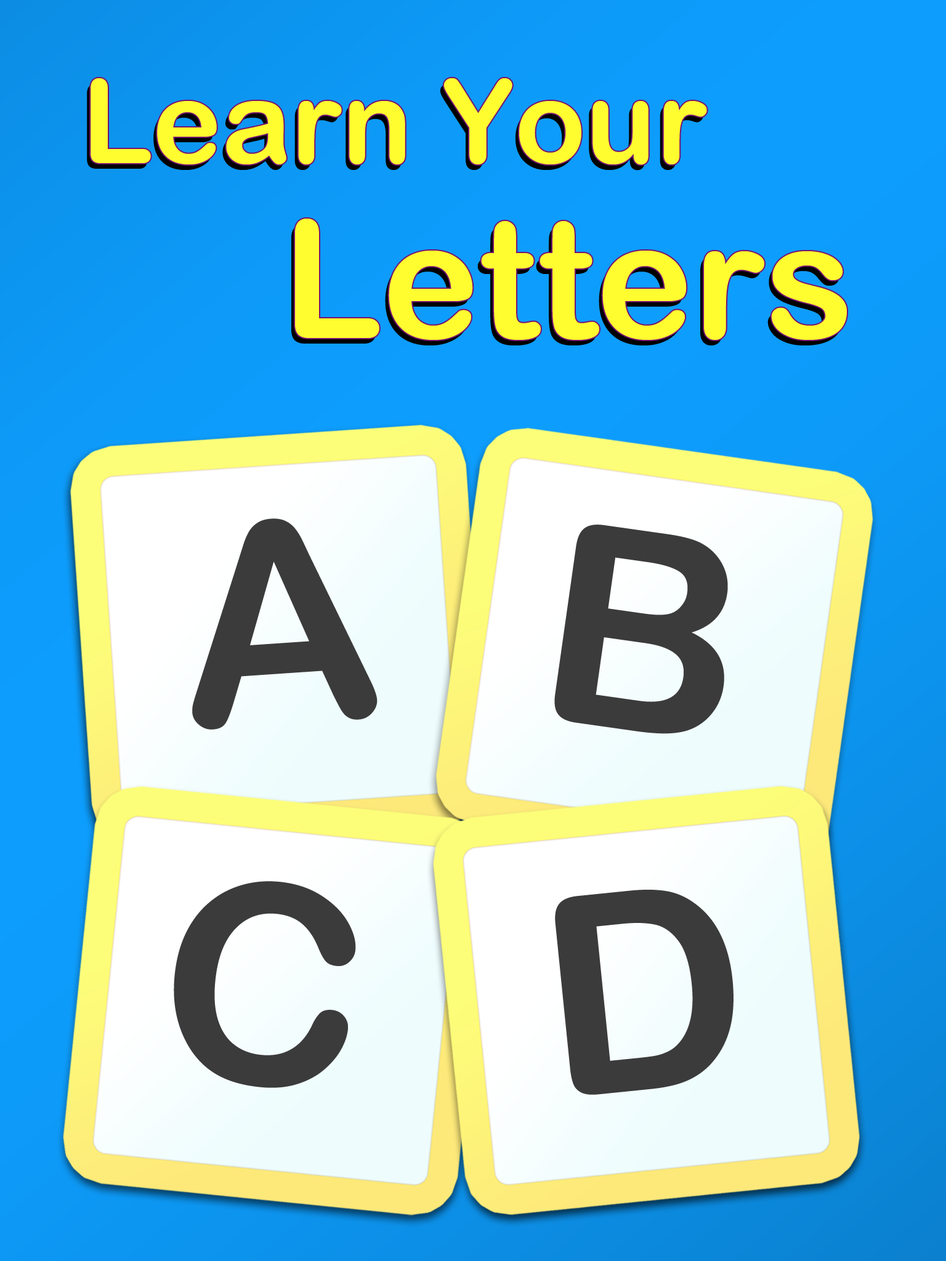
<style>
.page{position:relative;width:946px;height:1261px}
.page>*{position:absolute;margin:0}
.t1{font:116.7px/164.2px "ArialRoundedMTBold";color:#fffd30}
.t2{font:164.1px/175.3px "ArialRoundedMTBold";color:#fffd30}
.t3{font:278.5px "ArialRoundedMTBold";color:#3b3b3b}
</style>
<div class="page">
<p class="t1" style="left:91px;top:78px;width:756px;height:262px">Learn Your <br>       <span class="t2">Letters</span></p>
<p class="t3" style="left:192px;top:518px;width:185px;height:212px;rotate:-4deg">A</p>
<p class="t3" style="left:554px;top:525px;width:174px;height:209px;rotate:8deg">B</p>
<p class="t3" style="left:174px;top:881px;width:182px;height:207px;rotate:6deg">C</p>
<p class="t3" style="left:555px;top:890px;width:178px;height:205px;rotate:-6deg">D</p>
</div>
